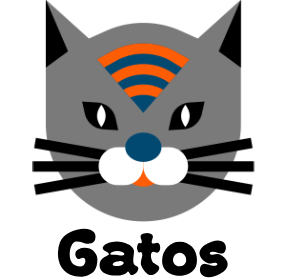
<style>
.page{position:relative;width:287px;height:278px;background:#ffffff}
.page>*{position:absolute;margin:0}
.t1{font:55.9px "Kush-Fat";color:#000000}
</style>
<div class="page">
<p class="t1" style="left:57px;top:228px;width:171px;height:50px">Gatos</p>
</div>
